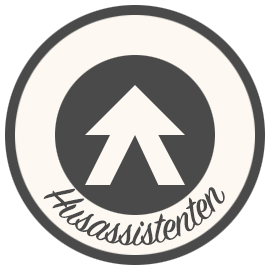
<style>
.page{position:relative;width:270px;height:270px;background:#fdf8f2}
.page>*{position:absolute;margin:0}
.t1{font:48px "SignPainter-HouseScript";color:#4a4a4a}
</style>
<div class="page">
<p class="t1" style="left:43px;top:187px;width:182px;height:59px">Husassistenten</p>
</div>
